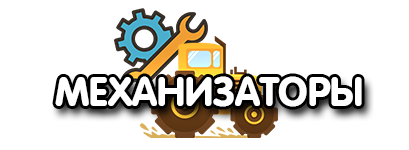
<style>
.page{position:relative;width:409px;height:150px;background:#ffffff}
.page>*{position:absolute;margin:0}
.t1{font:39.6px "VAGWorld-Bold";color:#ffffff}
</style>
<div class="page">
<p class="t1" style="left:55px;top:76px;width:307px;height:31px">МЕХАНИЗАТОРЫ</p>
</div>
